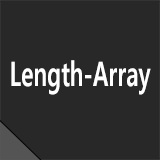
<style>
.page{position:relative;width:160px;height:160px;background:#282828}
.page>*{position:absolute;margin:0}
.t1{font:33.7px "MalgunGothicBold";color:#ffffff;scale:0.67 1}
</style>
<div class="page">
<p class="t1" style="left:11px;top:60px;width:140px;height:35px">Length-Array</p>
</div>
